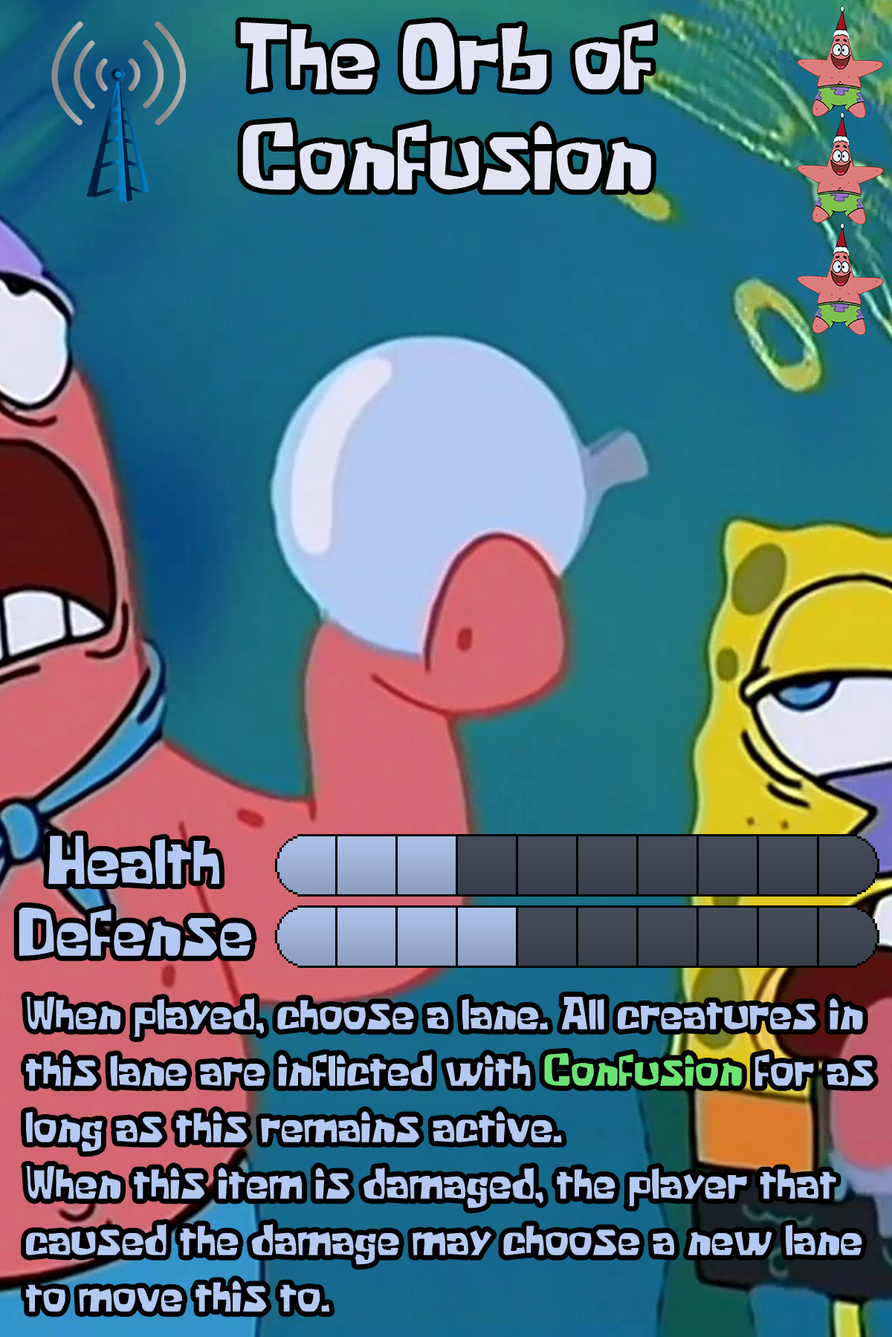
<style>
.page{position:relative;width:892px;height:1337px}
.page>*{position:absolute;margin:0}
.t1{font:89.2px/100.3px "KrabbyPatty";color:#e2e4f6}
.t2{font:63.9px "KrabbyPatty";color:#b4c9f1}
.t3{font:43.1px/56.5px "KrabbyPatty";color:#b4c9f1}
.t4{font:43.1px/56.5px "KrabbyPatty";color:#6ce374}
</style>
<div class="page">
<p class="t1" style="left:240px;top:22px;width:412px;height:168px;text-align:center">The Orb of<br>Confusion</p>
<p class="t2" style="left:48px;top:836px;width:171px;height:48px">Health</p>
<p class="t2" style="left:19px;top:908px;width:233px;height:48px">Defense</p>
<p class="t3" style="left:26px;top:997px;width:847px;height:315px">When played, choose a lane. All creatures in this lane are inflicted with <span class="t4">Confusion</span> for as long as this remains active.<br>When this item is damaged, the player that caused the damage may choose a new lane to move this to.</p>
</div>
